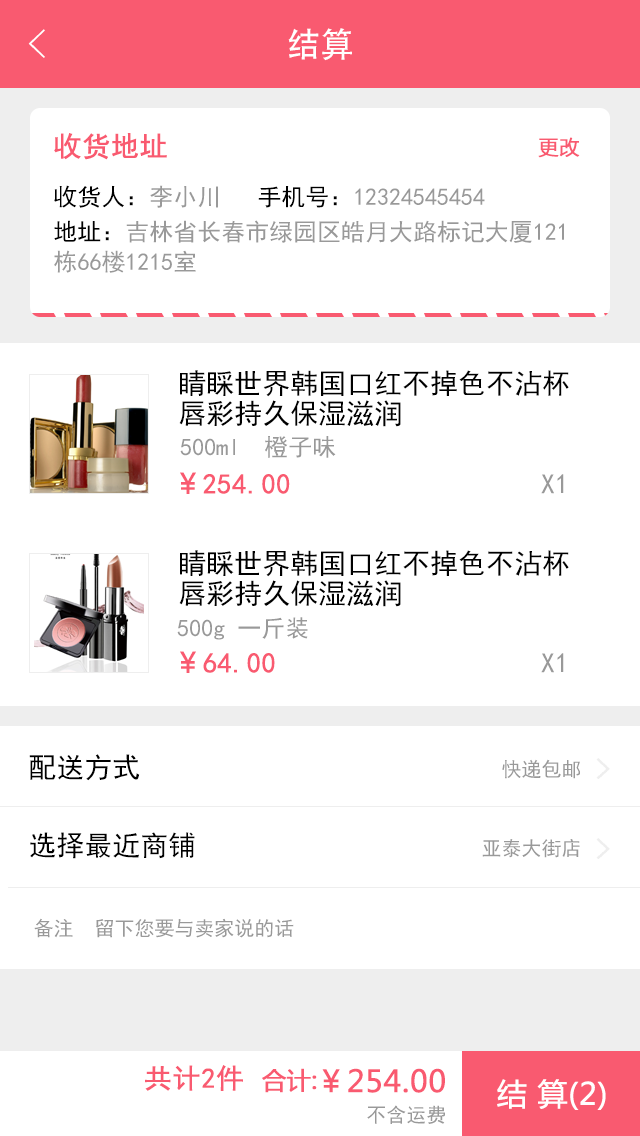
<style>
.page{position:relative;width:640px;height:1136px;background:#ffffff}
.page>*{position:absolute;margin:0}
.t1{font:40px "FZYXJW--GB1-0";color:#ffffff}
.t2{font:34px "AdobeHeitiStd-Regular";color:#ffffff}
.t3{font:28px "SimHei";color:#f95a70;font-weight:bold}
.t4{font:20px "MicrosoftYaHei";color:#f95a70;font-weight:bold}
.t5{font:24px "SimHei";color:#999999}
.t6{font:24px "SimHei";color:#000000}
.t7{font:24px/30px "SimHei";color:#999999}
.t8{font:24px/30px "SimHei";color:#000000}
.t9{font:28px/30px "SimHei";color:#000000}
.t10{font:28px "MicrosoftYaHei";color:#f95a70;font-weight:bold}
.t11{font:28px "SimHei";color:#999999}
.t12{font:28px "SimHei";color:#000000}
.t13{font:20px "SimHei";color:#999999}
.t14{font:28px "¿¬Ìå";color:#eeeeee;font-weight:bold}
.t15{font:24px "MicrosoftYaHei";color:#f95a70;font-weight:bold}
.t16{font:30px "MicrosoftYaHei";color:#f95a70;font-weight:bold}
.t17{font:30px "MicrosoftYaHei";color:#fffefe;font-weight:bold}
</style>
<div class="page">
<p class="t1" style="left:28px;top:29px;width:17px;height:29px">&lt;</p>
<p class="t2" style="left:288px;top:28px;width:64px;height:33px">结算</p>
<p class="t3" style="left:54px;top:133px;width:113px;height:27px">收货地址</p>
<p class="t4" style="left:538px;top:137px;width:42px;height:21px">更改</p>
<p class="t5" style="left:54px;top:185px;width:431px;height:23px"><span class="t6">收货人：</span>李小川 <span class="t6">  手机号：</span>12324545454</p>
<p class="t7" style="left:54px;top:220px;width:510px;height:53px"><span class="t8">地址：</span>吉林省长春市绿园区皓月大路标记大厦121<br>栋66楼1215室</p>
<p class="t9" style="left:179px;top:370px;width:390px;height:57px">睛睬世界韩国口红不掉色不沾杯<br>唇彩持久保湿滋润</p>
<p class="t5" style="left:180px;top:436px;width:156px;height:22px">500ml  橙子味</p>
<p class="t3" style="left:180px;top:472px;width:110px;height:22px"><span class="t10">￥</span>254.00</p>
<p class="t11" style="left:541px;top:474px;width:23px;height:20px">X1</p>
<p class="t9" style="left:179px;top:550px;width:390px;height:57px">睛睬世界韩国口红不掉色不沾杯<br>唇彩持久保湿滋润</p>
<p class="t5" style="left:177px;top:617px;width:131px;height:23px">500g 一斤装</p>
<p class="t3" style="left:180px;top:651px;width:95px;height:22px"><span class="t10">￥</span>64.00</p>
<p class="t11" style="left:541px;top:653px;width:23px;height:20px">X1</p>
<p class="t12" style="left:29px;top:754px;width:111px;height:27px">配送方式</p>
<p class="t13" style="left:502px;top:759px;width:78px;height:20px">快递包邮</p>
<p class="t14" style="left:596px;top:758px;width:14px;height:21px">&gt;</p>
<p class="t12" style="left:30px;top:832px;width:165px;height:27px">选择最近商铺</p>
<p class="t13" style="left:482px;top:839px;width:98px;height:19px">亚泰大街店</p>
<p class="t14" style="left:596px;top:838px;width:14px;height:21px">&gt;</p>
<p class="t13" style="left:34px;top:918px;width:260px;height:20px">备注  留下您要与卖家说的话</p>
<p class="t3" style="left:145px;top:1065px;width:98px;height:26px">共计2件</p>
<p class="t15" style="left:262px;top:1068px;width:55px;height:25px">合计:</p>
<p class="t16" style="left:322px;top:1068px;width:123px;height:25px">￥254.00</p>
<p class="t17" style="left:497px;top:1079px;width:109px;height:31px">结 算(2)</p>
<p class="t13" style="left:367px;top:1105px;width:78px;height:19px">不含运费</p>
</div>
